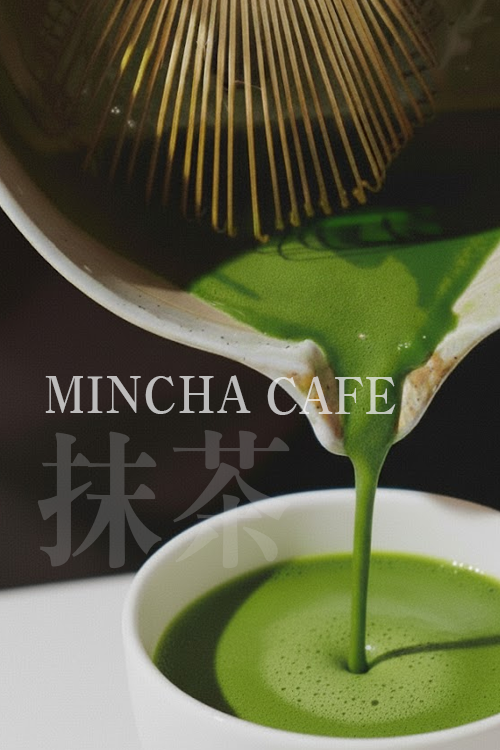
<style>
.page{position:relative;width:500px;height:750px}
.page>*{position:absolute;margin:0}
.t1{font:50px "H2mjrE";color:#bdbcbc;scale:0.86 1}
.t2{font:50px "H2mjrE";color:#c6c8bc;scale:0.86 1}
.t3{font:154.2px "H2mjrE";color:#494745;scale:0.86 1}
</style>
<div class="page">
<p class="t1" style="left:45px;top:375px;width:206px;height:39px">MINCHA</p>
<p class="t2" style="left:267px;top:376px;width:129px;height:39px">CAFE</p>
<p class="t3" style="left:37px;top:429px;width:254px;height:140px">抹茶</p>
</div>
